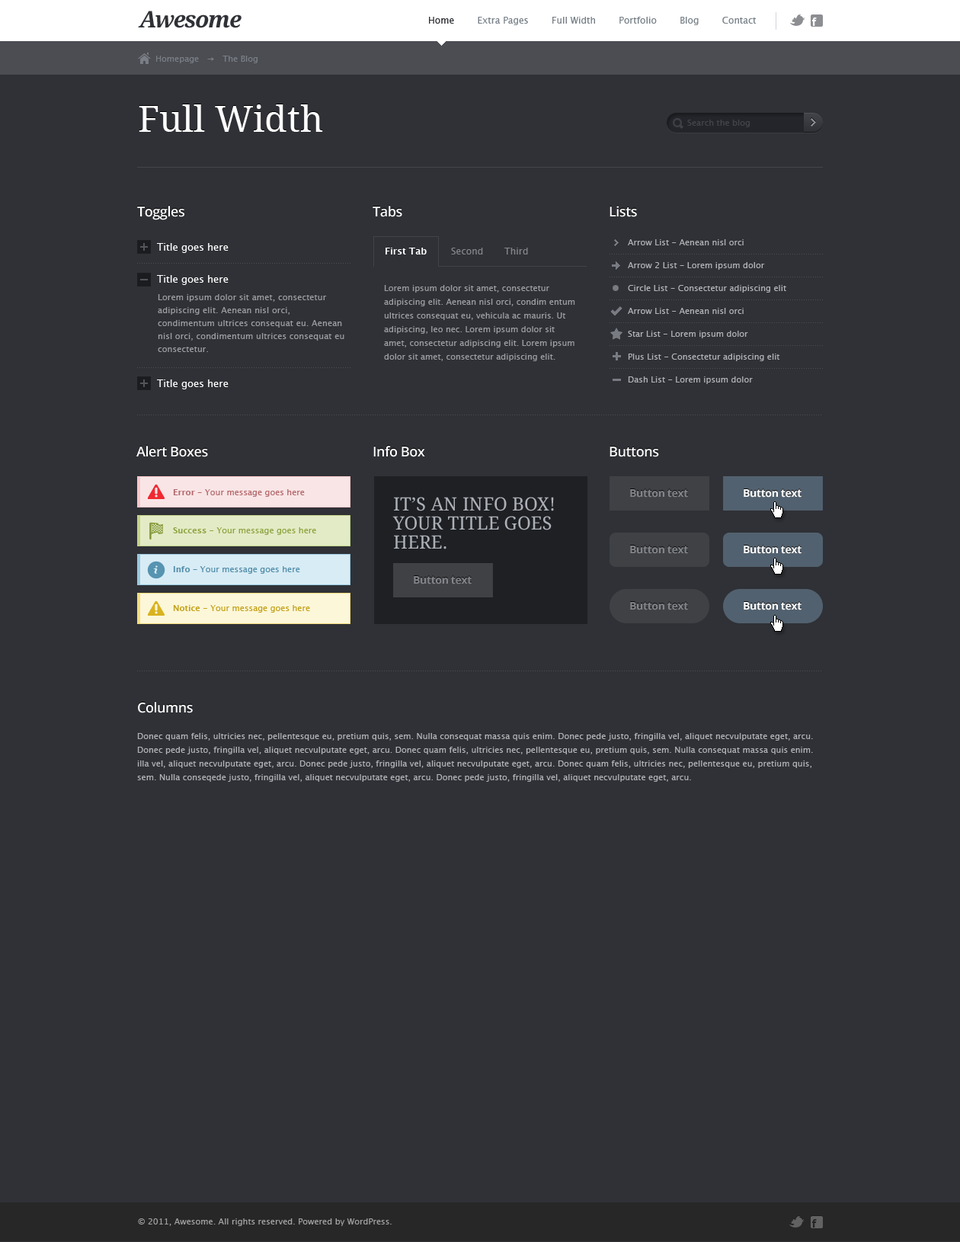
<style>
.page{position:relative;width:960px;height:1242px;background:#2f3136}
.page>*{position:absolute;margin:0}
.t1{font:22.9px "DroidSerif-BoldItalic";letter-spacing:-0.05em;color:#2f3136}
.t2{font:9.1px "LucidaSans";color:#788188}
.t3{font:9.1px "LucidaSans";color:#2f3136}
.t4{font:8.4px "LucidaSans";color:#7a7e85}
.t5{font:36.6px "DroidSerif";color:#ffffff}
.t6{font:8.4px "LucidaSans";color:#424449}
.t7{font:13.7px "OpenSans-Semibold";letter-spacing:-0.025em;color:#ffffff}
.t8{font:9.9px "LucidaSans";color:#ffffff}
.t9{font:8.4px/13.7px "LucidaSans";color:#b1b2b6}
.t10{font:8.4px/22.9px "LucidaSans";color:#b1b2b6}
.t11{font:9.1px "LucidaSans-Demi";color:#ffffff}
.t12{font:9.1px "LucidaSans";letter-spacing:0.01em;color:#83858d}
.t13{font:8.4px/13.7px "LucidaSans";color:#9c9da1}
.t14{font:8.4px/13px "LucidaSans";letter-spacing:0.01em;color:#9c9da1}
.t15{font:8.4px "LucidaSans";color:#b3696c}
.t16{font:8.4px "LucidaSans-Demi";color:#b3696c}
.t17{font:18.3px/19px "DroidSerif";color:#acb0b7;text-transform:uppercase}
.t18{font:10.7px "OpenSans-Bold";letter-spacing:-0.025em;color:#82858a}
.t19{font:10.7px "OpenSans-Bold";letter-spacing:-0.025em;color:#ffffff}
.t20{font:8.4px "LucidaSans";color:#8fa442}
.t21{font:8.4px "LucidaSans-Demi";color:#8fa442}
.t22{font:8.4px "LucidaSans";color:#528da9}
.t23{font:8.4px "LucidaSans-Demi";color:#528da9}
.t24{font:8.4px "LucidaSans";color:#c4a21b}
.t25{font:8.4px "LucidaSans-Demi";color:#c4a21b}
.t26{font:8.4px "LucidaSans";color:#a2a2a2}
</style>
<div class="page">
<p class="t1" style="left:138px;top:11px;width:104px;height:17px">Awesome</p>
<p class="t2" style="left:429px;top:17px;width:328px;height:8px"><span class="t3">Home        </span>Extra Pages        Full Width        Portfolio        Blog        Contact</p>
<p class="t4" style="left:156px;top:56px;width:102px;height:7px">Homepage   →   The Blog</p>
<p class="t5" style="left:139px;top:104px;width:184px;height:28px">Full Width</p>
<p class="t6" style="left:687px;top:120px;width:63px;height:7px">Search the blog</p>
<p class="t7" style="left:137px;top:206px;width:47px;height:14px">Toggles</p>
<p class="t7" style="left:373px;top:206px;width:29px;height:11px">Tabs</p>
<p class="t7" style="left:610px;top:206px;width:27px;height:11px">Lists</p>
<p class="t8" style="left:157px;top:243px;width:72px;height:10px">Title goes here</p>
<p class="t9" style="left:628px;top:239px;width:158px;height:145px"><span class="t10">Arrow List - </span>Aenean nisl orci<br><span class="t10">Arrow 2 List - </span>Lorem ipsum dolor<br><span class="t10">Circle List - </span>Consectetur adipiscing elit<br><span class="t10">Arrow List - </span>Aenean nisl orci<br><span class="t10">Star List - </span>Lorem ipsum dolor<br><span class="t10">Plus List - </span>Consectetur adipiscing elit<br><span class="t10">Dash List - </span>Lorem ipsum dolor</p>
<p class="t11" style="left:386px;top:248px;width:41px;height:6px">First Tab</p>
<p class="t12" style="left:451px;top:248px;width:32px;height:6px">Second</p>
<p class="t12" style="left:504px;top:248px;width:24px;height:6px">Third</p>
<p class="t8" style="left:157px;top:275px;width:72px;height:10px">Title goes here</p>
<p class="t13" style="left:384px;top:285px;width:191px;height:76px">Lorem ipsum dolor sit amet, consectetur adipiscing elit. Aenean nisl orci, condim entum ultrices consequat eu, vehicula ac mauris. Ut adipiscing, leo nec. Lorem ipsum dolor sit amet, consectetur adipiscing elit. Lorem ipsum dolor sit amet, consectetur adipiscing elit.</p>
<p class="t14" style="left:158px;top:294px;width:186px;height:58px">Lorem ipsum dolor sit amet, consectetur adipiscing elit. Aenean nisl orci, condimentum ultrices consequat eu. Aenean nisl orci, condimentum ultrices consequat eu consectetur.</p>
<p class="t8" style="left:157px;top:379px;width:72px;height:10px">Title goes here</p>
<p class="t7" style="left:136px;top:446px;width:72px;height:11px">Alert Boxes</p>
<p class="t7" style="left:373px;top:446px;width:52px;height:11px">Info Box</p>
<p class="t7" style="left:610px;top:447px;width:49px;height:10px">Buttons</p>
<p class="t15" style="left:173px;top:489px;width:132px;height:8px"><span class="t16">Error</span> - Your message goes here</p>
<p class="t17" style="left:392px;top:497px;width:162px;height:52px">It’s an info box! <br>Your title goes<br>here.</p>
<p class="t18" style="left:630px;top:489px;width:58px;height:9px">Button text</p>
<p class="t19" style="left:744px;top:489px;width:58px;height:9px">Button text</p>
<p class="t20" style="left:173px;top:527px;width:143px;height:8px"><span class="t21">Success</span> - Your message goes here</p>
<p class="t18" style="left:630px;top:546px;width:58px;height:8px">Button text</p>
<p class="t19" style="left:744px;top:546px;width:58px;height:8px">Button text</p>
<p class="t22" style="left:173px;top:566px;width:127px;height:8px"><span class="t23">Info</span> - Your message goes here</p>
<p class="t18" style="left:414px;top:576px;width:58px;height:8px">Button text</p>
<p class="t24" style="left:173px;top:605px;width:137px;height:8px"><span class="t25">Notice</span> - Your message goes here</p>
<p class="t18" style="left:630px;top:602px;width:58px;height:8px">Button text</p>
<p class="t19" style="left:744px;top:602px;width:58px;height:8px">Button text</p>
<p class="t7" style="left:138px;top:702px;width:55px;height:11px">Columns</p>
<p class="t9" style="left:137px;top:733px;width:676px;height:49px">Donec quam felis, ultricies nec, pellentesque eu, pretium quis, sem. Nulla consequat massa quis enim. Donec pede justo, fringilla vel, aliquet necvulputate eget, arcu. Donec pede justo, fringilla vel, aliquet necvulputate eget, arcu. Donec quam felis, ultricies nec, pellentesque eu, pretium quis, sem. Nulla consequat massa quis enim. illa vel, aliquet necvulputate eget, arcu. Donec pede justo, fringilla vel, aliquet necvulputate eget, arcu. Donec quam felis, ultricies nec, pellentesque eu, pretium quis, sem. Nulla conseqede justo, fringilla vel, aliquet necvulputate eget, arcu. Donec pede justo, fringilla vel, aliquet necvulputate eget, arcu.</p>
<p class="t26" style="left:138px;top:1218px;width:254px;height:8px">© 2011, Awesome. All rights reserved. Powered by WordPress.</p>
</div>
